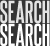
<style>
.page{position:relative;width:50px;height:46px;background:#333333}
.page>*{position:absolute;margin:0}
.t1{font:27px "SteelfishRg-Bold";color:#e3e3e3;text-transform:uppercase}
.t2{font:27px "SteelfishRg-Bold";color:#ffffff;text-transform:uppercase}
</style>
<div class="page">
<p class="t1" style="left:0px;top:0px;width:50px;height:24px">New       Popular       Stations       BLOGS       Search</p>
<p class="t2" style="left:0px;top:23px;width:50px;height:23px">New       Popular       Stations       BLOGS       Search</p>
</div>
